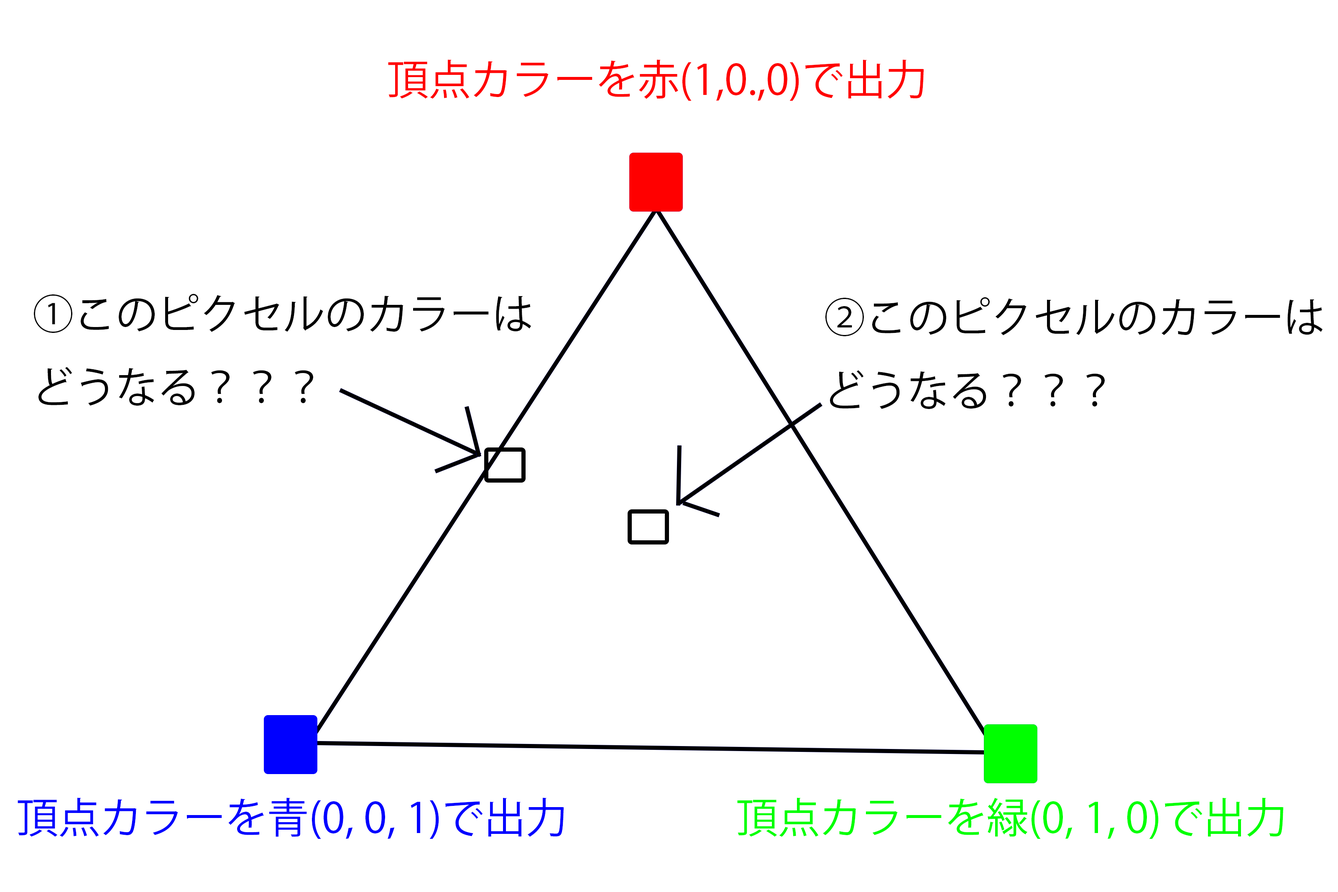
<style>
.page{position:relative;width:1338px;height:892px;background:#ffffff}
.page>*{position:absolute;margin:0}
.t1{font:41.8px "KozGoPr6N-Regular";color:#ff0000}
.t2{font:41.8px "KozGoPr6N-Regular";color:#000000}
.t3{font:41.8px "KozGoPr6N-Regular";color:#0000ff}
.t4{font:41.8px "KozGoPr6N-Regular";color:#00ff00}
</style>
<div class="page">
<p class="t1" style="left:388px;top:59px;width:536px;height:42px">頂点カラーを赤(1,0.,0)で出力</p>
<p class="t2" style="left:34px;top:293px;width:497px;height:112px">①このピクセルのカラーは<br>どうなる？？？</p>
<p class="t2" style="left:825px;top:297px;width:497px;height:112px">②このピクセルのカラーは<br>どうなる？？？</p>
<p class="t3" style="left:18px;top:797px;width:546px;height:41px">頂点カラーを青(0, 0, 1)で出力</p>
<p class="t4" style="left:737px;top:797px;width:546px;height:41px">頂点カラーを緑(0, 1, 0)で出力</p>
</div>
